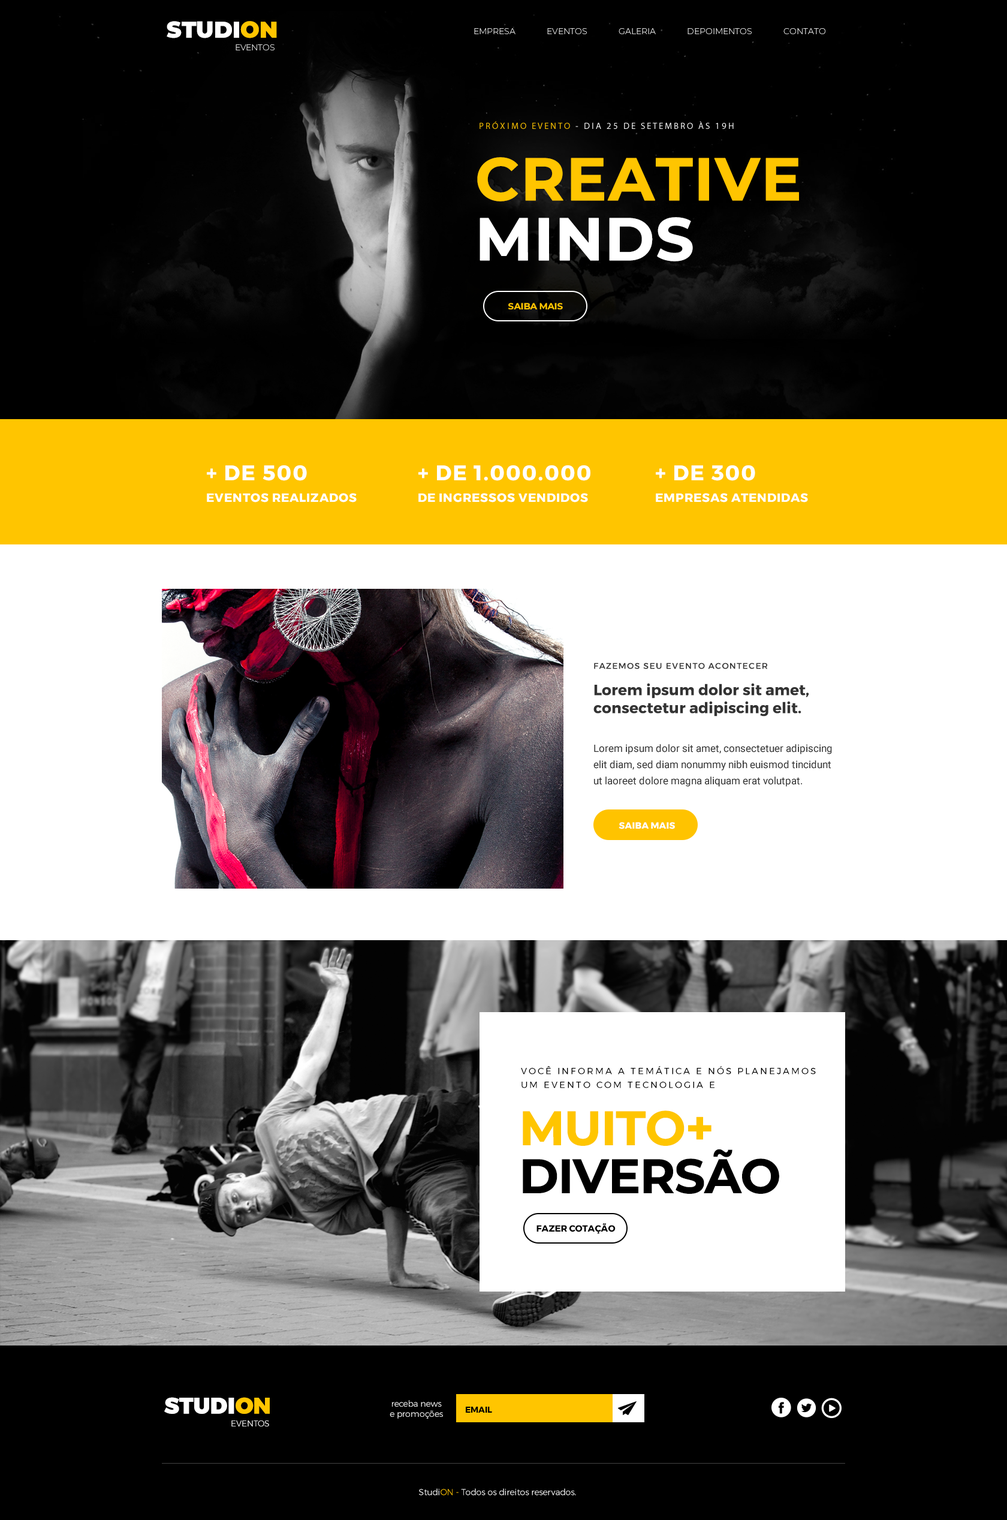
<style>
.page{position:relative;width:1007px;height:1520px;background:#000000}
.page>*{position:absolute;margin:0}
.t1{font:22.8px "Montserrat-Black";color:#ffffff}
.t2{font:22.8px "Montserrat-Black";color:#ffc500}
.t3{font:8.4px "Montserrat-Light";color:#ffffff}
.t4{font:9px "Montserrat-Regular";letter-spacing:0.2em;color:#ffffff}
.t5{font:9px "Montserrat-Regular";letter-spacing:0.2em;color:#ffc500}
.t6{font:59.9px/59.9px "Montserrat-Bold";color:#ffc500;font-weight:bold}
.t7{font:59.9px/59.9px "Montserrat-Bold";color:#ffffff;font-weight:bold}
.t8{font:9px "Montserrat-Bold";color:#ffc500}
.t9{font:12px/21.6px "Montserrat-Bold";letter-spacing:0.05em;color:#ffffff}
.t10{font:21px/21.6px "Montserrat-Bold";letter-spacing:0.05em;color:#ffffff}
.t11{font:8.4px "Montserrat-Medium";letter-spacing:0.1em;color:#333333;text-transform:uppercase}
.t12{font:15px/18.3px "Montserrat-Bold";color:#333333}
.t13{font:10.2px/16.3px "Roboto-Regular";color:#333333}
.t14{font:9px "Montserrat-Bold";color:#ffffff}
.t15{font:9px/13.8px "Montserrat-Regular";letter-spacing:0.2em;color:#000000}
.t16{font:48px/48px "Montserrat-Bold";letter-spacing:-0.039em;color:#000000;font-weight:bold}
.t17{font:48px/48px "Montserrat-Bold";letter-spacing:-0.039em;color:#ffc500;font-weight:bold}
.t18{font:9px "Montserrat-Bold";color:#000000}
.t19{font:23px "Montserrat-Black";color:#ffffff}
.t20{font:23px "Montserrat-Black";color:#ffc602}
.t21{font:8.5px/10.2px "Montserrat-Light";color:#ffffff}
.t22{font:8.5px "Montserrat-Bold";color:#000000}
.t23{font:8.5px "Montserrat-Light";color:#ffffff}
.t24{font:8.4px "Montserrat-Light";color:#ffc602}
</style>
<div class="page">
<p class="t1" style="left:167px;top:21px;width:110px;height:17px">STUDI<span class="t2">ON</span></p>
<p class="t3" style="left:474px;top:28px;width:351px;height:6px">EMPRESA             EVENTOS             GALERIA             DEPOIMENTOS             CONTATO</p>
<p class="t3" style="left:236px;top:44px;width:39px;height:6px">EVENTOS</p>
<p class="t4" style="left:480px;top:121px;width:254px;height:8px"><span class="t5">PRÓXIMO EVENTO</span> - DIA 25 DE SETEMBRO ÀS 19H</p>
<p class="t6" style="left:477px;top:157px;width:322px;height:104px">CREATIVE <br><span class="t7">MINDS</span></p>
<p class="t8" style="left:508px;top:303px;width:55px;height:7px">SAIBA MAIS</p>
<p class="t9" style="left:207px;top:465px;width:150px;height:37px"><span class="t10">+ DE 500 <br></span>EVENTOS REALIZADOS</p>
<p class="t9" style="left:418px;top:465px;width:172px;height:37px"><span class="t10">+ DE 1.000.000 <br></span>DE INGRESSOS VENDIDOS</p>
<p class="t9" style="left:656px;top:465px;width:152px;height:37px"><span class="t10">+ DE 300 <br></span>EMPRESAS ATENDIDAS</p>
<p class="t11" style="left:594px;top:662px;width:174px;height:7px">fazemos seu evento acontecer</p>
<p class="t12" style="left:593px;top:683px;width:216px;height:33px">Lorem ipsum dolor sit amet, consectetur adipiscing elit.</p>
<p class="t13" style="left:593px;top:744px;width:239px;height:42px">Lorem ipsum dolor sit amet, consectetuer adipiscing elit diam, sed diam nonummy nibh euismod tincidunt ut laoreet dolore magna aliquam erat volutpat.</p>
<p class="t14" style="left:619px;top:822px;width:56px;height:7px">SAIBA MAIS</p>
<p class="t15" style="left:521px;top:1066px;width:295px;height:22px">VOCÊ INFORMA A TEMÁTICA E NÓS PLANEJAMOS <br>UM EVENTO COM TECNOLOGIA E</p>
<p class="t16" style="left:523px;top:1110px;width:256px;height:84px"><span class="t17">MUITO+<br></span>DIVERSÃO</p>
<p class="t18" style="left:537px;top:1223px;width:79px;height:11px">FAZER COTAÇÃO</p>
<p class="t19" style="left:164px;top:1397px;width:106px;height:17px">STUDI<span class="t20">ON</span></p>
<p class="t21" style="left:390px;top:1400px;width:53px;height:18px;text-align:center">receba news<br>e promoções</p>
<p class="t22" style="left:466px;top:1406px;width:26px;height:6px">EMAIL</p>
<p class="t23" style="left:231px;top:1420px;width:38px;height:6px">EVENTOS</p>
<p class="t3" style="left:419px;top:1488px;width:157px;height:7px">Studi<span class="t24">ON - </span>Todos os direitos reservados.</p>
</div>
